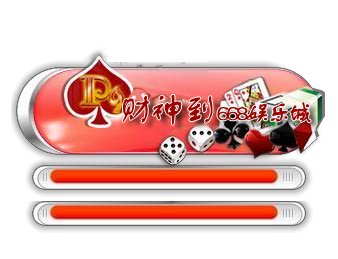
<style>
.page{position:relative;width:338px;height:259px;background:#ffffff}
.page>*{position:absolute;margin:0}
.t1{font:36px "FZSTK--GBK1-0";letter-spacing:-0.14em;color:#9d0400;font-weight:bold}
.t2{font:24px "FZSTK--GBK1-0";letter-spacing:-0.14em;color:#9d0400;font-weight:bold}
</style>
<div class="page">
<p class="t1" style="left:122px;top:95px;width:91px;height:30px">财神到</p>
<p class="t2" style="left:217px;top:102px;width:94px;height:21px">668娱乐城</p>
</div>
